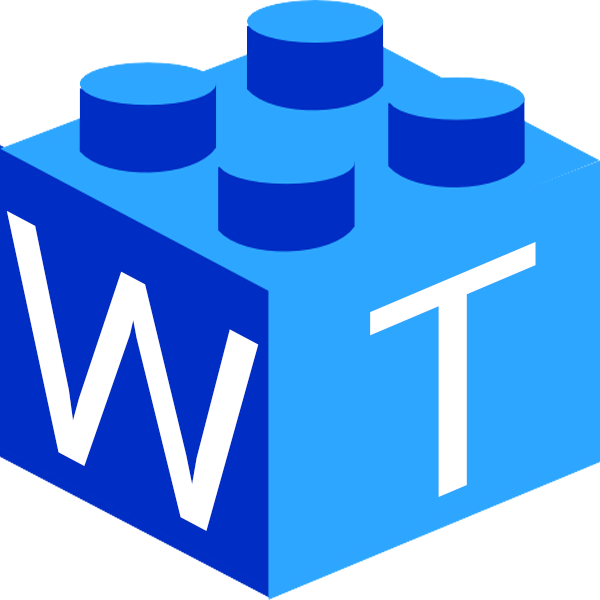
<style>
.page{position:relative;width:600px;height:600px;background:#2da6ff}
.page>*{position:absolute;margin:0}
.t1{font:300.4px "Roboto-Regular";color:#ffffff;scale:1.13 1}
.t2{font:300.4px "Roboto-Regular";color:#ffffff;scale:1.09 1}
</style>
<div class="page">
<p class="t1" style="left:6px;top:211px;width:253px;height:320px;rotate:28deg">W</p>
<p class="t2" style="left:370px;top:242px;width:166px;height:255px;rotate:-23deg">T</p>
</div>
